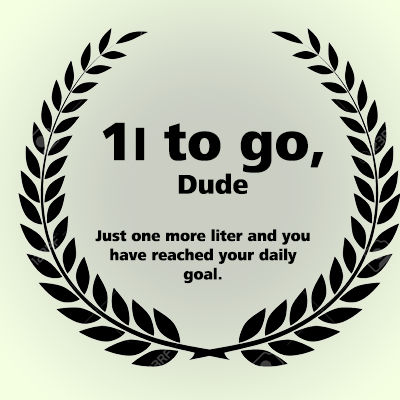
<style>
.page{position:relative;width:400px;height:400px}
.page>*{position:absolute;margin:0}
.t1{font:55.8px "FrutigerNextLT-Heavy";color:#000000}
.t2{font:44.7px "FrutigerNextLT-Heavy";color:#000000}
.t3{font:28px "FrutigerNextLT-Heavy";color:#000000}
.t4{font:16px "FrutigerNextLT-Heavy";color:#000000}
</style>
<div class="page">
<p class="t1" style="left:102px;top:122px;width:222px;height:72px;text-align:center">1<span class="t2">l</span> to go,<br><span class="t3">Dude</span></p>
<p class="t4" style="left:95px;top:229px;width:215px;height:55px;text-align:center">Just one more liter and you<br>have reached your daily<br>goal.</p>
</div>
